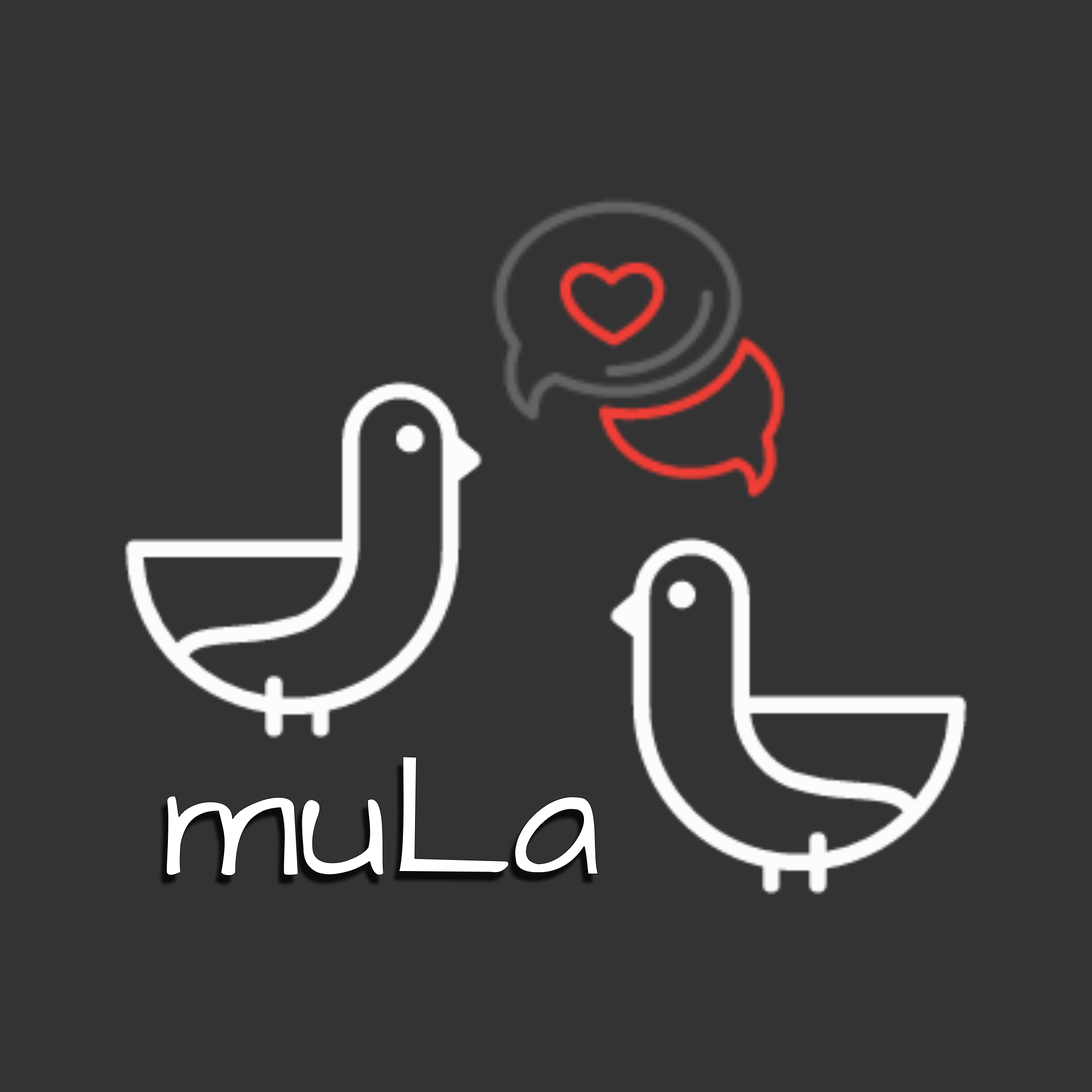
<style>
.page{position:relative;width:1092px;height:1092px;background:#333333}
.page>*{position:absolute;margin:0}
.t1{font:176.9px "ArchitectsDaughter-Regular";color:#ffffff}
</style>
<div class="page">
<p class="t1" style="left:166px;top:756px;width:433px;height:120px">muLa</p>
</div>
